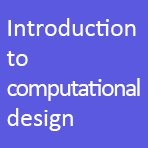
<style>
.page{position:relative;width:148px;height:148px;background:#5b59e0}
.page>*{position:absolute;margin:0}
.t1{font:10.8px/30px "Calibri";color:#ffffff}
.t2{font:10.8px/30px "Calibri";letter-spacing:-0.15em;color:#ffffff}
</style>
<div class="page">
<p class="t1" style="left:6px;top:18px;width:134px;height:113px">Introduction<br>to <br><span class="t2">computational<br></span>design</p>
</div>
